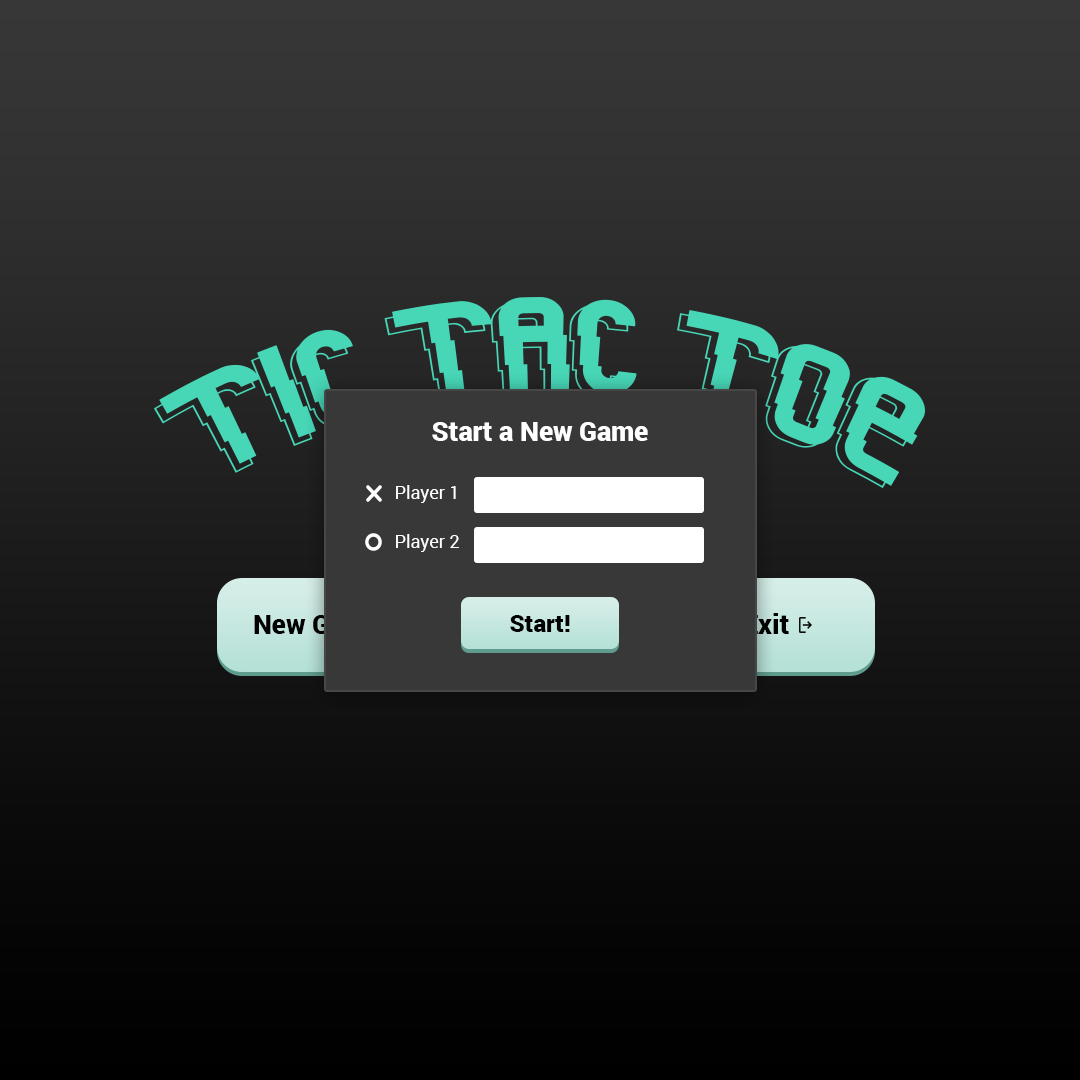
<style>
.page{position:relative;width:1080px;height:1080px}
.page>*{position:absolute;margin:0}
.t1{font:26.8px "Roboto-Black";color:#ffffff}
.t2{font:18px "Roboto-Regular";color:#ffffff}
.t3{font:26.8px "Roboto-Black"}
.t4{font:24px "Roboto-Black";color:#000000}
.t5{font:26.8px "Roboto-Black";color:#010102}
</style>
<div class="page">
<p class="t1" style="left:432px;top:422px;width:216px;height:19px">Start a New Game</p>
<p class="t2" style="left:396px;top:485px;width:60px;height:18px">Player 1</p>
<p class="t2" style="left:396px;top:534px;width:63px;height:18px">Player 2</p>
<p class="t3" style="left:254px;top:615px;width:127px;height:19px">New Game</p>
<p class="t4" style="left:510px;top:615px;width:60px;height:17px">Start!</p>
<p class="t5" style="left:744px;top:613px;width:45px;height:21px">Exit</p>
</div>
